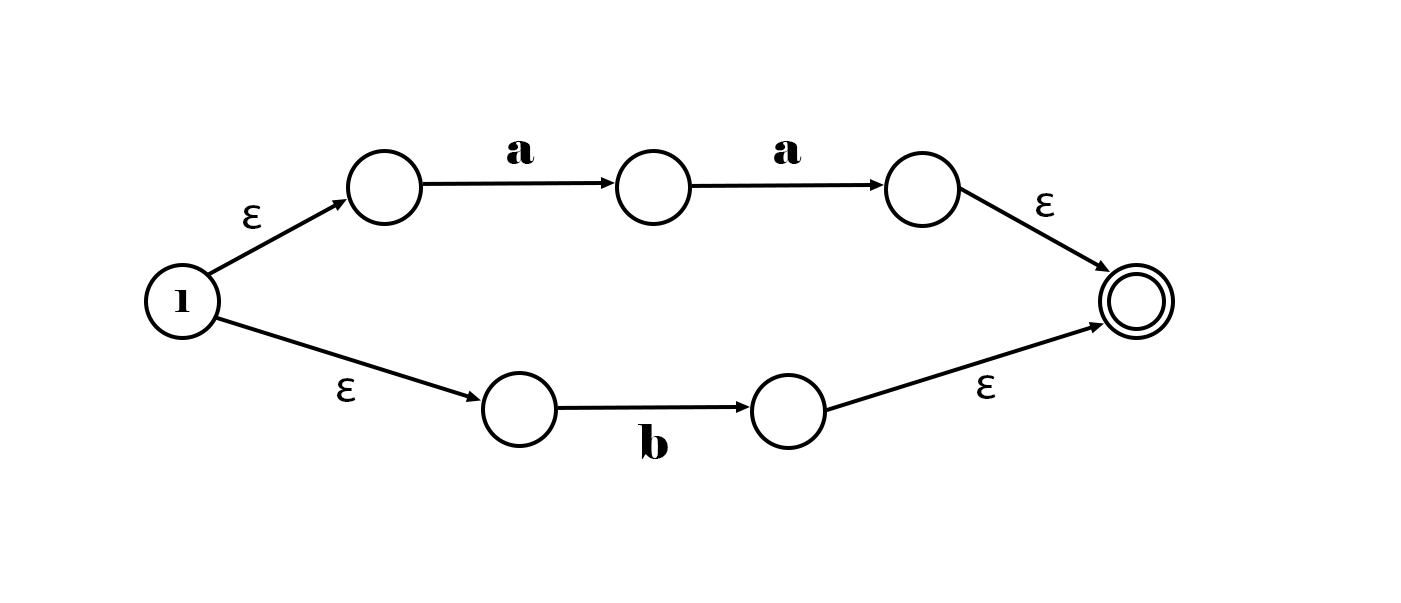
<style>
.page{position:relative;width:1401px;height:603px;background:#ffffff}
.page>*{position:absolute;margin:0}
.t1{font:48px "Elephant-Regular";color:#000000}
.t2{font:48px "MyriadPro-Regular";color:#000000}
.t3{font:30px "Elephant-Regular";color:#000000}
</style>
<div class="page">
<p class="t1" style="left:507px;top:141px;width:28px;height:23px">a</p>
<p class="t1" style="left:774px;top:141px;width:28px;height:23px">a</p>
<p class="t2" style="left:1036px;top:193px;width:19px;height:24px">ε</p>
<p class="t2" style="left:243px;top:205px;width:19px;height:24px">ε</p>
<p class="t3" style="left:174px;top:290px;width:16px;height:22px">1</p>
<p class="t2" style="left:977px;top:375px;width:19px;height:24px">ε</p>
<p class="t2" style="left:337px;top:378px;width:19px;height:24px">ε</p>
<p class="t1" style="left:638px;top:424px;width:30px;height:35px">b</p>
</div>
